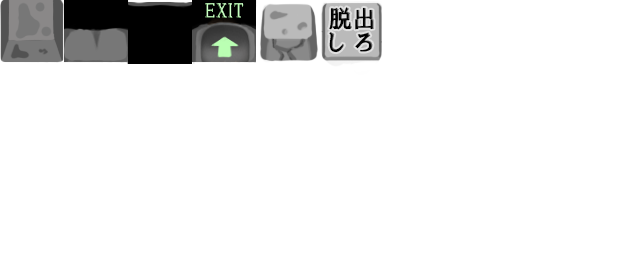
<style>
.page{position:relative;width:640px;height:256px;background:#ffffff}
.page>*{position:absolute;margin:0}
.t1{font:18px "HGPSoeiPresenceEB";letter-spacing:0.05em;color:#baffb3}
.t2{font:24px/24px "HGPSoeiPresenceEB";letter-spacing:0.05em;color:#000000}
.t3{font:24px/24px "HGPSoeiPresenceEB";color:#000000}
</style>
<div class="page">
<p class="t1" style="left:205px;top:3px;width:39px;height:15px">EXIT</p>
<p class="t2" style="left:329px;top:7px;width:45px;height:46px"><span class="t3">脱出<br></span>し ろ</p>
</div>
